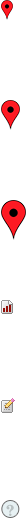
<style>
.page{position:relative;width:26px;height:520px;background:#ffffff}
.page>*{position:absolute;margin:0}
.t1{font:15px "Hoboken-Bold";color:#b9c1c2}
</style>
<div class="page">
<p class="t1" style="left:6px;top:504px;width:8px;height:12px">?</p>
</div>
